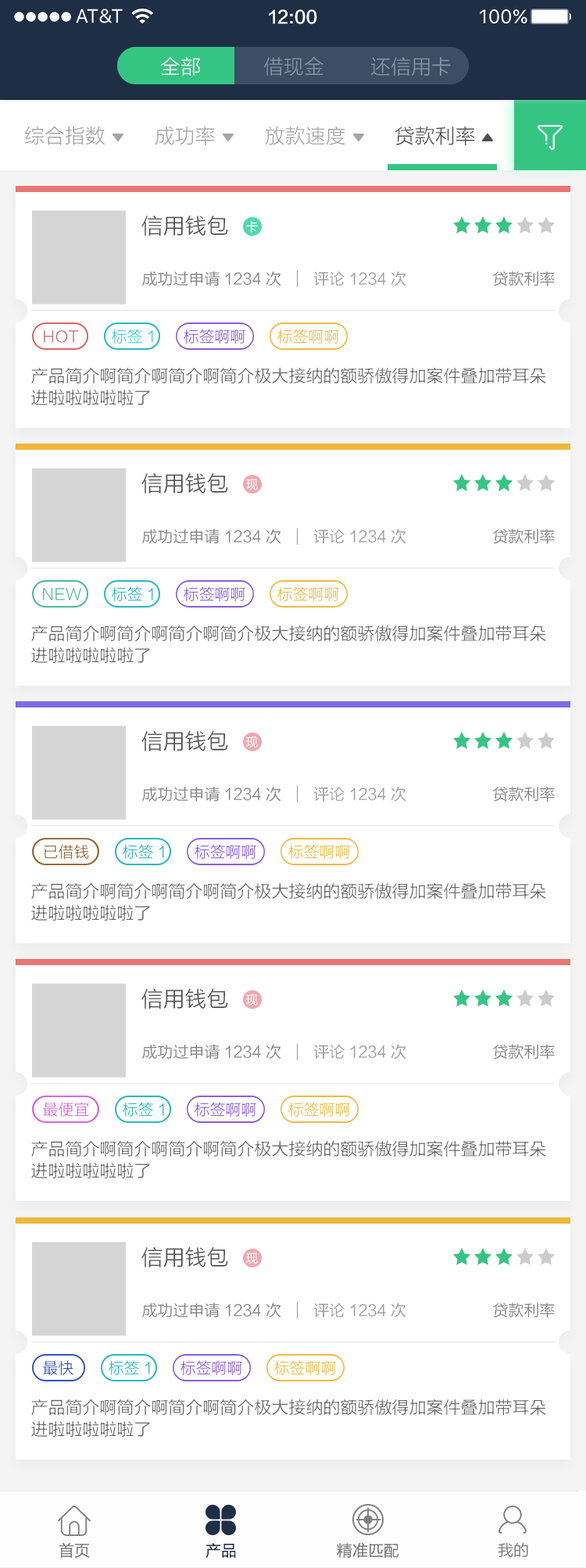
<style>
.page{position:relative;width:586px;height:1568px;background:#ffffff}
.page>*{position:absolute;margin:0}
.t1{font:17.2px "FZLTZHK--GBK1-0";color:#ffffff}
.t2{font:20.3px "FZLTXHK";color:#ffffff}
.t3{font:20.3px "FZLTXHK";color:#8895a8}
.t4{font:20.3px "FZLTXHK";color:#a6a6a6}
.t5{font:20.3px "FZLTXHK";color:#4d4d4d}
.t6{font:21.9px "FZLTXHK";color:#4d4d4d}
.t7{font:12.5px "FZLTXHK";color:#ffffff}
.t8{font:15.6px "FZLTXHK";color:#808080}
.t9{font:15.6px "FZLTXHK";color:#999999}
.t10{font:15.6px "FZLTXHK";color:#33cccc}
.t11{font:15.6px "FZLTXHK";color:#8857db}
.t12{font:15.6px "FZLTXHK";color:#f1b73c}
.t13{font:15.6px "FZLTXHK";color:#cc6666}
.t14{font:17.2px/21.9px "FZLTXHK";color:#666666}
.t15{font:15.6px "FZLTXHK";color:#45b991}
.t16{font:15.6px "FZLTXHK";color:#21b5c3}
.t17{font:15.6px "FZLTXHK";color:#996633}
.t18{font:15.6px "FZLTXHK";color:#db5edc}
.t19{font:15.6px "FZLTXHK";color:#294fbb}
.t20{font:15.6px "FZLTXHK";color:#1e2e45}
.t21{font:15.6px "FZLTHK--GBK1-0";color:#808080}
</style>
<div class="page">
<p class="t1" style="left:269px;top:9px;width:48px;height:15px">12:00</p>
<p class="t2" style="left:161px;top:57px;width:39px;height:19px">全部</p>
<p class="t3" style="left:263px;top:57px;width:60px;height:19px">借现金</p>
<p class="t3" style="left:371px;top:57px;width:80px;height:19px">还信用卡</p>
<p class="t4" style="left:25px;top:126px;width:80px;height:19px">综合指数</p>
<p class="t4" style="left:155px;top:126px;width:60px;height:20px">成功率</p>
<p class="t4" style="left:265px;top:126px;width:80px;height:19px">放款速度</p>
<p class="t5" style="left:394px;top:126px;width:81px;height:20px">贷款利率</p>
<p class="t6" style="left:141px;top:216px;width:87px;height:20px">信用钱包</p>
<p class="t7" style="left:246px;top:220px;width:12px;height:13px">卡</p>
<p class="t8" style="left:142px;top:271px;width:139px;height:16px">成功过申请1234次</p>
<p class="t9" style="left:313px;top:271px;width:93px;height:15px">评论1234次</p>
<p class="t8" style="left:493px;top:271px;width:61px;height:16px">贷款利率</p>
<p class="t10" style="left:112px;top:329px;width:41px;height:15px">标签1</p>
<p class="t11" style="left:184px;top:329px;width:61px;height:15px">标签啊啊</p>
<p class="t12" style="left:277px;top:329px;width:62px;height:15px">标签啊啊</p>
<p class="t13" style="left:44px;top:330px;width:35px;height:13px">HOT</p>
<p class="t14" style="left:31px;top:367px;width:515px;height:38px">产品简介啊简介啊简介啊简介极大接纳的额骄傲得加案件叠加带耳朵<br>进啦啦啦啦啦了</p>
<p class="t6" style="left:141px;top:473px;width:87px;height:21px">信用钱包</p>
<p class="t7" style="left:246px;top:479px;width:12px;height:11px">现</p>
<p class="t8" style="left:142px;top:529px;width:139px;height:15px">成功过申请1234次</p>
<p class="t9" style="left:313px;top:529px;width:93px;height:14px">评论1234次</p>
<p class="t8" style="left:493px;top:529px;width:61px;height:15px">贷款利率</p>
<p class="t15" style="left:43px;top:588px;width:38px;height:12px">NEW</p>
<p class="t16" style="left:112px;top:586px;width:41px;height:15px">标签1</p>
<p class="t11" style="left:184px;top:586px;width:61px;height:15px">标签啊啊</p>
<p class="t12" style="left:277px;top:586px;width:62px;height:15px">标签啊啊</p>
<p class="t14" style="left:31px;top:625px;width:515px;height:38px">产品简介啊简介啊简介啊简介极大接纳的额骄傲得加案件叠加带耳朵<br>进啦啦啦啦啦了</p>
<p class="t6" style="left:141px;top:731px;width:87px;height:20px">信用钱包</p>
<p class="t7" style="left:246px;top:736px;width:12px;height:12px">现</p>
<p class="t8" style="left:142px;top:786px;width:139px;height:16px">成功过申请1234次</p>
<p class="t9" style="left:313px;top:786px;width:93px;height:15px">评论1234次</p>
<p class="t8" style="left:493px;top:786px;width:61px;height:16px">贷款利率</p>
<p class="t17" style="left:44px;top:844px;width:45px;height:15px">已借钱</p>
<p class="t16" style="left:123px;top:844px;width:41px;height:15px">标签1</p>
<p class="t11" style="left:194px;top:844px;width:62px;height:15px">标签啊啊</p>
<p class="t12" style="left:288px;top:844px;width:62px;height:15px">标签啊啊</p>
<p class="t14" style="left:31px;top:882px;width:515px;height:39px">产品简介啊简介啊简介啊简介极大接纳的额骄傲得加案件叠加带耳朵<br>进啦啦啦啦啦了</p>
<p class="t6" style="left:141px;top:989px;width:87px;height:20px">信用钱包</p>
<p class="t7" style="left:246px;top:994px;width:12px;height:12px">现</p>
<p class="t8" style="left:142px;top:1044px;width:139px;height:16px">成功过申请1234次</p>
<p class="t9" style="left:313px;top:1044px;width:93px;height:15px">评论1234次</p>
<p class="t8" style="left:493px;top:1044px;width:61px;height:16px">贷款利率</p>
<p class="t18" style="left:43px;top:1102px;width:46px;height:15px">最便宜</p>
<p class="t16" style="left:123px;top:1102px;width:41px;height:15px">标签1</p>
<p class="t11" style="left:194px;top:1102px;width:62px;height:15px">标签啊啊</p>
<p class="t12" style="left:288px;top:1102px;width:62px;height:15px">标签啊啊</p>
<p class="t14" style="left:31px;top:1140px;width:515px;height:38px">产品简介啊简介啊简介啊简介极大接纳的额骄傲得加案件叠加带耳朵<br>进啦啦啦啦啦了</p>
<p class="t6" style="left:141px;top:1247px;width:87px;height:20px">信用钱包</p>
<p class="t7" style="left:246px;top:1253px;width:12px;height:11px">现</p>
<p class="t8" style="left:142px;top:1303px;width:139px;height:15px">成功过申请1234次</p>
<p class="t9" style="left:313px;top:1303px;width:93px;height:14px">评论1234次</p>
<p class="t8" style="left:493px;top:1303px;width:61px;height:15px">贷款利率</p>
<p class="t19" style="left:43px;top:1360px;width:30px;height:15px">最快</p>
<p class="t16" style="left:109px;top:1360px;width:41px;height:15px">标签1</p>
<p class="t11" style="left:180px;top:1360px;width:62px;height:15px">标签啊啊</p>
<p class="t12" style="left:274px;top:1360px;width:62px;height:15px">标签啊啊</p>
<p class="t14" style="left:31px;top:1399px;width:515px;height:38px">产品简介啊简介啊简介啊简介极大接纳的额骄傲得加案件叠加带耳朵<br>进啦啦啦啦啦了</p>
<p class="t8" style="left:59px;top:1542px;width:31px;height:16px">首页</p>
<p class="t20" style="left:205px;top:1543px;width:31px;height:15px">产品</p>
<p class="t8" style="left:337px;top:1543px;width:62px;height:15px">精准匹配</p>
<p class="t21" style="left:497px;top:1542px;width:31px;height:16px">我的</p>
</div>
